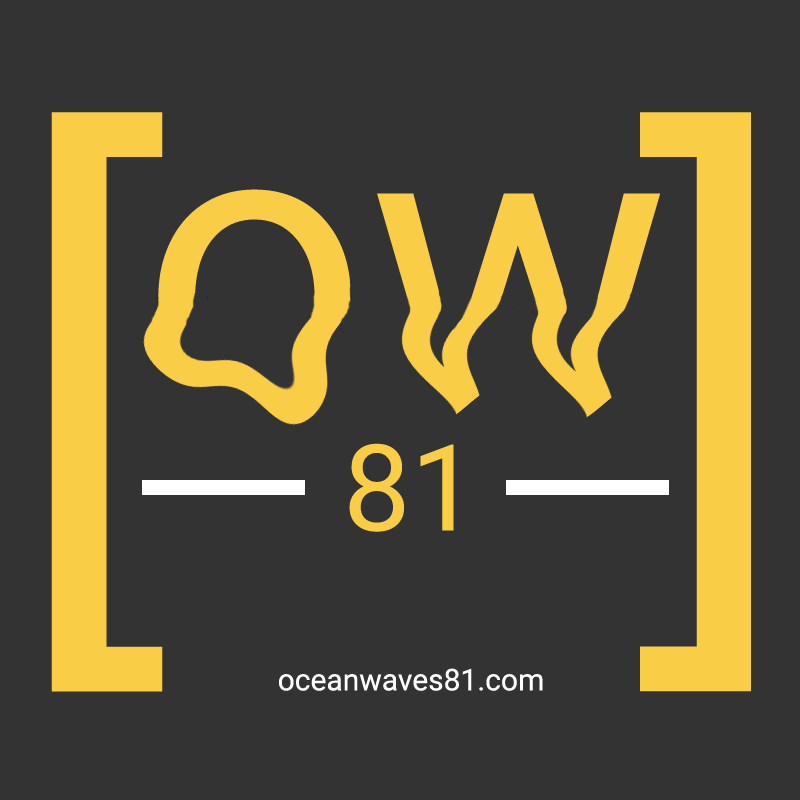
<style>
.page{position:relative;width:800px;height:800px;background:#333333}
.page>*{position:absolute;margin:0}
.t1{font:600px "Roboto-Regular";color:#f9cd45}
.t2{font:30px "Roboto-Regular";color:#ffffff}
</style>
<div class="page">
<p class="t1" style="left:51px;top:112px;width:112px;height:580px">[</p>
<p class="t1" style="left:640px;top:112px;width:111px;height:580px">]</p>
<p class="t2" style="left:279px;top:668px;width:264px;height:23px">oceanwaves81.com</p>
</div>
